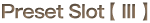
<style>
.page{position:relative;width:150px;height:23px;background:#ffffff}
.page>*{position:absolute;margin:0}
.t1{font:18px "GothicMB101Pro-DeBold";letter-spacing:-0.04em}
.t2{font:18px "GothicMB101Pro-DeBold";letter-spacing:-0.04em;color:#8b6e51}
</style>
<div class="page">
<p class="t1" style="left:2px;top:2px;width:146px;height:19px">Preset Slot【     】</p>
<p class="t2" style="left:122px;top:4px;width:13px;height:15px;opacity:0.9">III</p>
</div>
